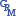
<style>
.page{position:relative;width:16px;height:16px;background:#ffffff}
.page>*{position:absolute;margin:0}
.t1{font:10px "Rockwell";color:#3953a4}
</style>
<div class="page">
<p class="t1" style="left:0px;top:0px;width:7px;height:7px">C</p>
<p class="t1" style="left:4px;top:4px;width:7px;height:7px">R</p>
<p class="t1" style="left:7px;top:9px;width:9px;height:7px">M</p>
</div>
